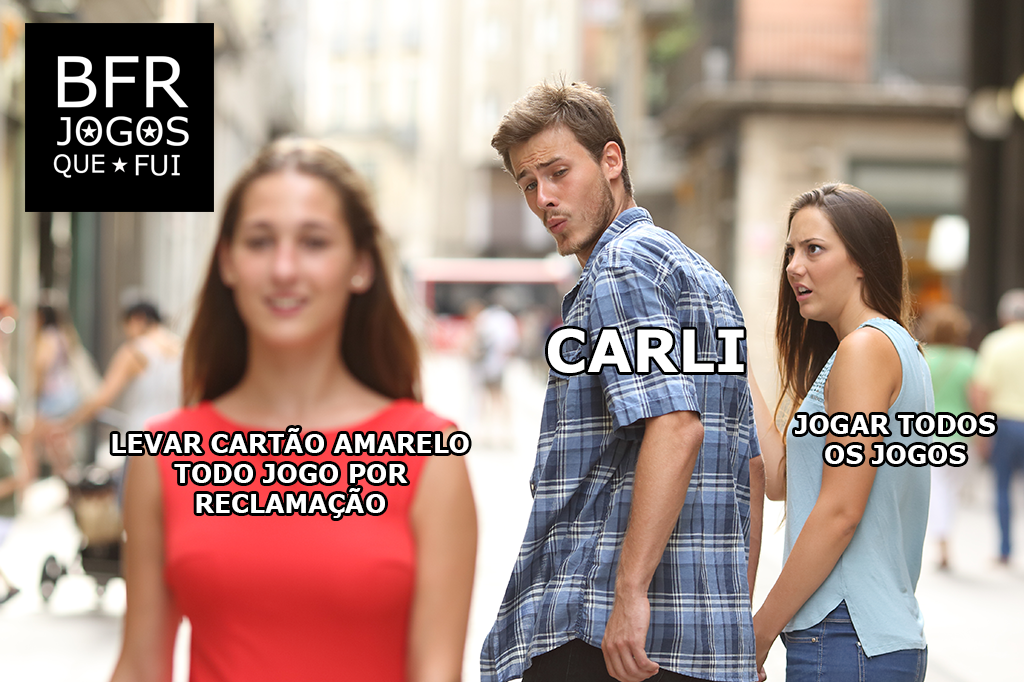
<style>
.page{position:relative;width:1024px;height:682px}
.page>*{position:absolute;margin:0}
.t1{font:58.3px "Verdana-Bold";color:#ffffff}
.t2{font:25px "Verdana-Bold";color:#ffffff}
</style>
<div class="page">
<p class="t1" style="left:548px;top:328px;width:196px;height:45px">CARLI</p>
<p class="t2" style="left:795px;top:415px;width:200px;height:49px;text-align:center">JOGAR TODOS OS JOGOS</p>
<p class="t2" style="left:112px;top:428px;width:357px;height:90px;text-align:center">LEVAR CARTÃO AMARELO TODO JOGO POR RECLAMAÇÃO</p>
</div>
